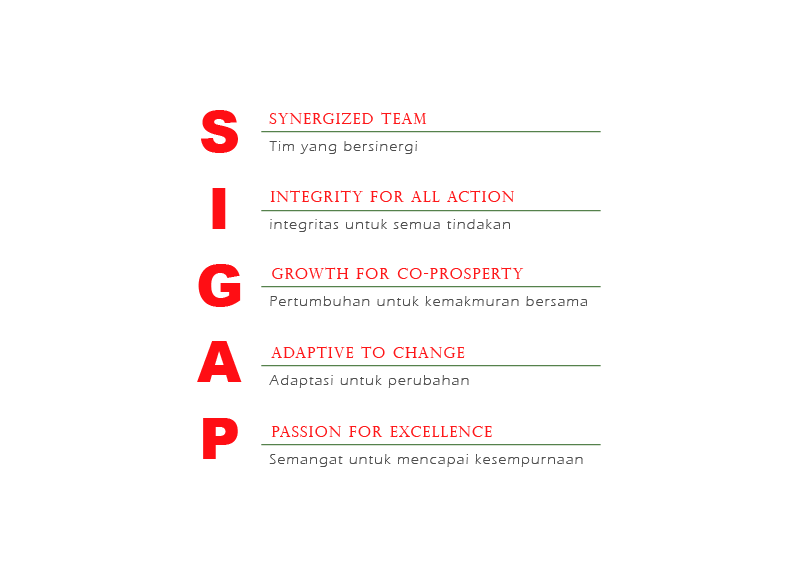
<style>
.page{position:relative;width:800px;height:571px;background:#ffffff}
.page>*{position:absolute;margin:0}
.t1{font:56.8px "Arial-Black";letter-spacing:0.1em;color:#ff0e14}
.t2{font:14.8px "PerpetuaTitlingMT-Light";letter-spacing:0.1em;color:#fe1719}
.t3{font:14.8px "ErasITC-Light";letter-spacing:0.1em;color:#4e4e4e}
</style>
<div class="page">
<p class="t1" style="left:201px;top:110px;width:37px;height:43px">S</p>
<p class="t2" style="left:269px;top:112px;width:158px;height:12px">Synergized team</p>
<p class="t3" style="left:269px;top:141px;width:148px;height:13px">Tim yang bersinergi</p>
<p class="t1" style="left:212px;top:188px;width:14px;height:41px">I</p>
<p class="t2" style="left:270px;top:190px;width:244px;height:12px">integrity for all action</p>
<p class="t3" style="left:270px;top:219px;width:240px;height:13px">integritas untuk semua tindakan</p>
<p class="t1" style="left:198px;top:264px;width:43px;height:43px">G</p>
<p class="t2" style="left:272px;top:267px;width:252px;height:12px">growth for co-prosperty</p>
<p class="t3" style="left:270px;top:296px;width:317px;height:10px">Pertumbuhan untuk kemakmuran bersama</p>
<p class="t1" style="left:197px;top:341px;width:45px;height:41px">A</p>
<p class="t2" style="left:271px;top:346px;width:194px;height:12px">adaptive to change</p>
<p class="t3" style="left:269px;top:375px;width:200px;height:13px">Adaptasi untuk perubahan</p>
<p class="t1" style="left:203px;top:418px;width:35px;height:41px">P</p>
<p class="t2" style="left:271px;top:426px;width:221px;height:11px">passion for excellence</p>
<p class="t3" style="left:269px;top:454px;width:314px;height:13px">Semangat untuk mencapai kesempurnaan</p>
</div>
